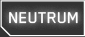
<style>
.page{position:relative;width:85px;height:37px;background:#333333}
.page>*{position:absolute;margin:0}
.t1{font:18px "BlenderPro-Medium";color:#ffffff}
</style>
<div class="page">
<p class="t1" style="left:9px;top:12px;width:69px;height:12px">NEUTRUM</p>
</div>
